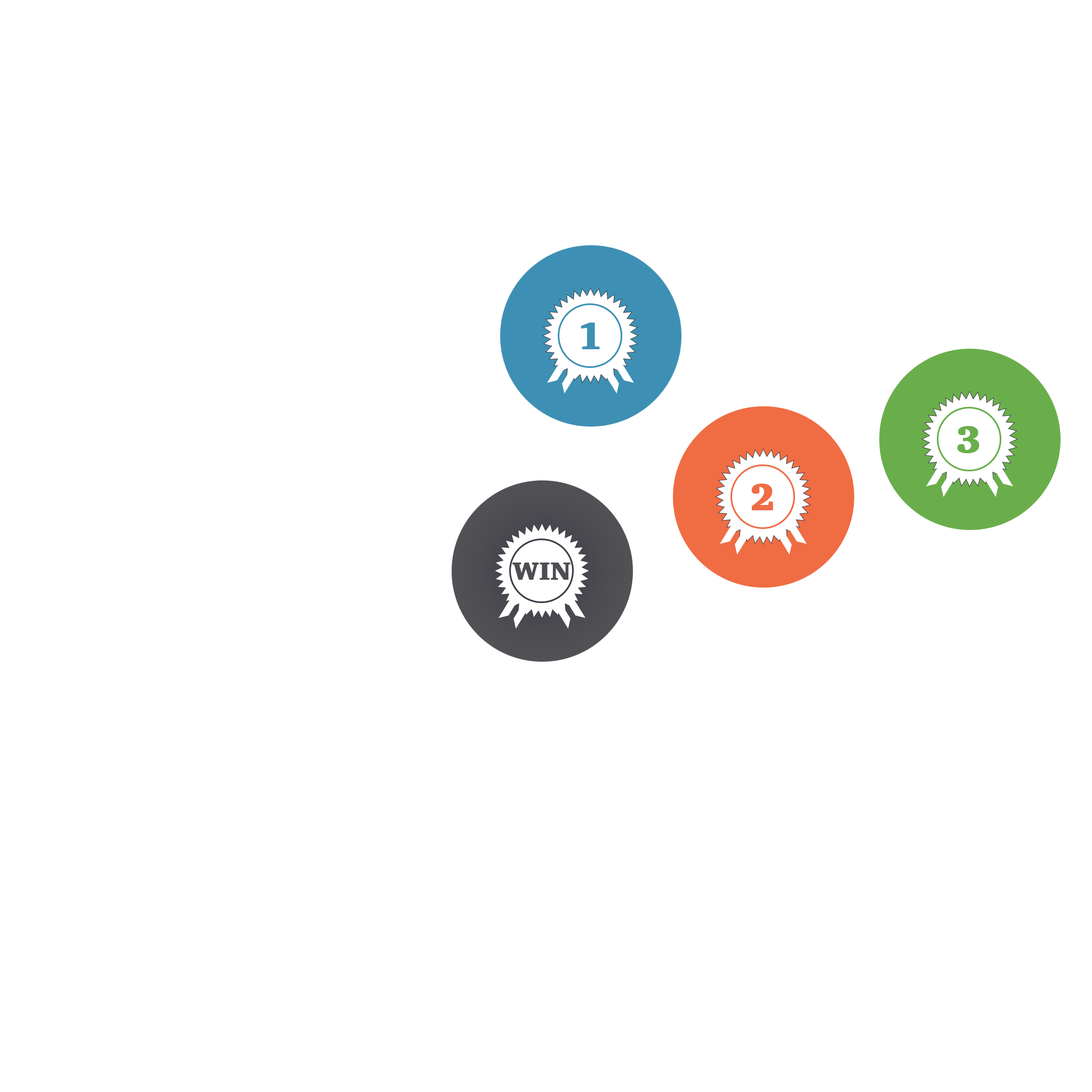
<style>
.page{position:relative;width:1092px;height:1092px;background:#ffffff}
.page>*{position:absolute;margin:0}
.t1{font:38.4px "Charter-Black";color:#3d90b4;font-weight:bold}
.t2{font:38.4px "Charter-Black";color:#6aae4b;font-weight:bold}
.t3{font:38.4px "Charter-Black";color:#f06c44;font-weight:bold}
.t4{font:25.6px "Charter-Black";color:#4e4e52;font-weight:bold}
</style>
<div class="page">
<p class="t1" style="left:581px;top:323px;width:19px;height:26px">1</p>
<p class="t2" style="left:957px;top:426px;width:22px;height:27px">3</p>
<p class="t3" style="left:751px;top:484px;width:22px;height:26px">2</p>
<p class="t4" style="left:512px;top:563px;width:59px;height:17px">WIN</p>
</div>
